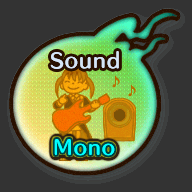
<style>
.page{position:relative;width:192px;height:192px;background:#333333}
.page>*{position:absolute;margin:0}
.t1{font:19px "HummingStd-B";letter-spacing:0.05em;color:#d6e6f7}
.t2{font:19px "HummingStd-B";letter-spacing:0.05em;color:#00ffff}
</style>
<div class="page">
<p class="t1" style="left:50px;top:51px;width:69px;height:18px">Sound</p>
<p class="t2" style="left:54px;top:139px;width:61px;height:17px">Mono</p>
</div>
